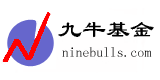
<style>
.page{position:relative;width:160px;height:80px;background:#ffffff}
.page>*{position:absolute;margin:0}
.t1{font:24px "Á¥Êé-Regular";color:#000000}
.t2{font:13.7px "Á¥Êé-Regular"}
</style>
<div class="page">
<p class="t1" style="left:58px;top:22px;width:96px;height:16px">九牛基金</p>
<p class="t2" style="left:62px;top:47px;width:90px;height:10px">ninebulls.com</p>
</div>
